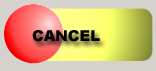
<style>
.page{position:relative;width:156px;height:71px;background:#d6d3ce}
.page>*{position:absolute;margin:0}
.t1{font:15px "Arial-Black";color:#000000}
</style>
<div class="page">
<p class="t1" style="left:32px;top:30px;width:68px;height:12px">CANCEL</p>
</div>
